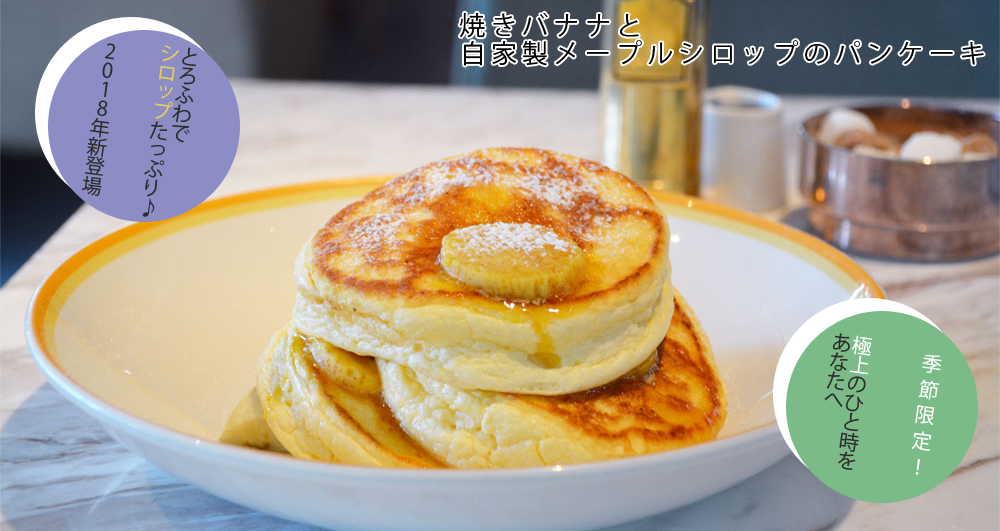
<style>
.page{position:relative;width:1000px;height:531px}
.page>*{position:absolute;margin:0}
.t1{font:25.9px/27.2px "KozGoPro-Regular";letter-spacing:0.21em;color:#010101}
.t2{font:20px "KozGoPro-Regular";letter-spacing:-0.03em;color:#2d2d2d}
.t3{font:20px/21px "KozGoPro-Regular";letter-spacing:-0.03em;color:#2d2d2d}
.t4{font:20px/19.1px "KozGoPro-Regular";letter-spacing:-0.03em;color:#e8ce55}
.t5{font:20px/19.1px "KozGoPro-Regular";letter-spacing:-0.03em;color:#2d2d2d}
.t6{font:20px/21px "KozGoPro-Regular";letter-spacing:-0.03em;color:#ffffff}
.t7{font:20px "KozGoPro-Regular";letter-spacing:0.29em;color:#ffffff}
</style>
<div class="page">
<p class="t1" style="left:459px;top:12px;width:525px;height:54px">焼きバナナと<br>自家製メープルシロップのパンケーキ</p>
<p class="t2" style="left:82px;top:43px;width:33px;height:153px;rotate:8deg">2018年新登場</p>
<p class="t3" style="left:142px;top:45px;width:55px;height:172px;rotate:8deg">とろふわで<br><span class="t4">シロップ</span><span class="t5">たっぷり♪</span></p>
<p class="t3" style="left:824px;top:333px;width:49px;height:137px;rotate:8deg"><span class="t6">極上</span>のひと時を<br>あなたへ</p>
<p class="t7" style="left:911px;top:354px;width:31px;height:121px;rotate:8deg">季節限定！</p>
</div>
